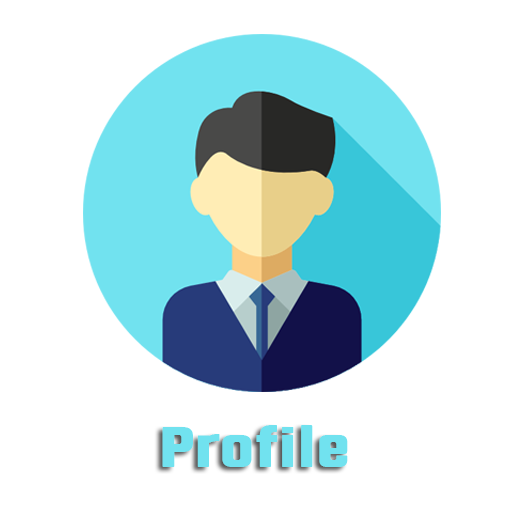
<style>
.page{position:relative;width:512px;height:512px;background:#ffffff}
.page>*{position:absolute;margin:0}
.t1{font:57.1px "Fragua-Bold";color:#71e2ef;font-weight:bold;scale:1.17 1}
</style>
<div class="page">
<p class="t1" style="left:162px;top:425px;width:186px;height:42px">Profile</p>
</div>
